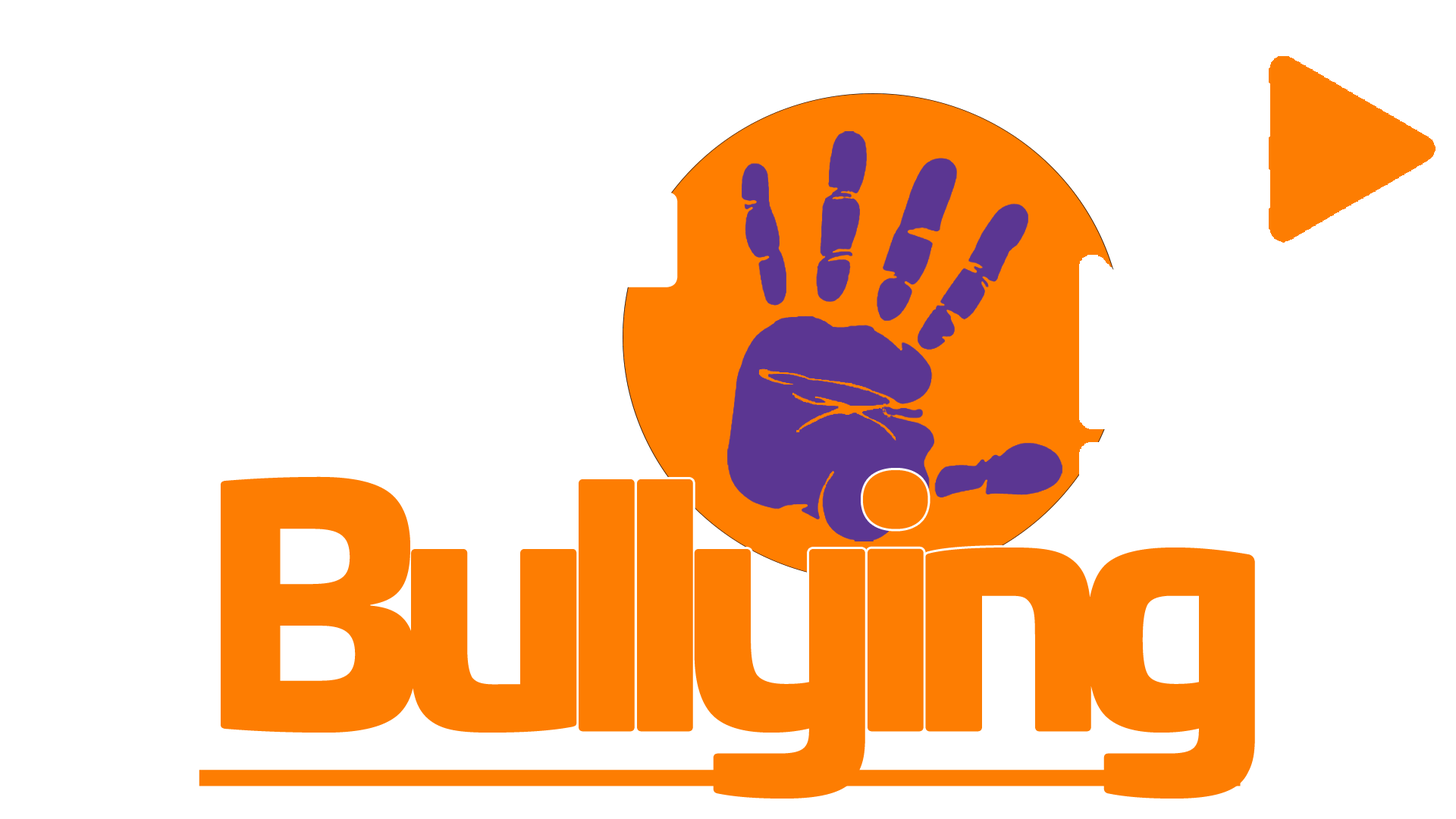
<style>
.page{position:relative;width:1456px;height:819px;background:#ffffff}
.page>*{position:absolute;margin:0}
.t1{font:321.3px "UniviaPro-Black";letter-spacing:-0.1em;color:#fd7d02;text-decoration:underline}
</style>
<div class="page">
<p class="t1" style="left:199px;top:470px;width:1056px;height:329px">Bullying</p>
</div>
